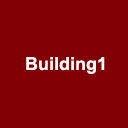
<style>
.page{position:relative;width:128px;height:128px;background:#800003}
.page>*{position:absolute;margin:0}
.t1{font:18px "Arial-BoldMT";color:#ffffff}
</style>
<div class="page">
<p class="t1" style="left:26px;top:57px;width:79px;height:17px">Building1</p>
</div>
